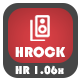
<style>
.page{position:relative;width:80px;height:80px;background:#464646}
.page>*{position:absolute;margin:0}
.t1{font:15px "Bauhaus93";color:#ffffff}
.t2{font:12px "Bauhaus93";color:#ffffff}
</style>
<div class="page">
<p class="t1" style="left:15px;top:46px;width:50px;height:12px">HROCK</p>
<p class="t2" style="left:15px;top:65px;width:49px;height:10px">HR 1.06x</p>
</div>
